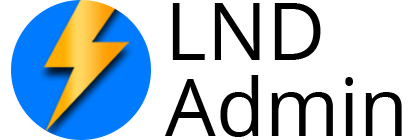
<style>
.page{position:relative;width:420px;height:140px;background:#ffffff}
.page>*{position:absolute;margin:0}
.t1{font:80px/76px "OpenSans-Regular";color:#000000}
</style>
<div class="page">
<p class="t1" style="left:165px;top:3px;width:237px;height:134px">LND<br>Admin</p>
</div>
